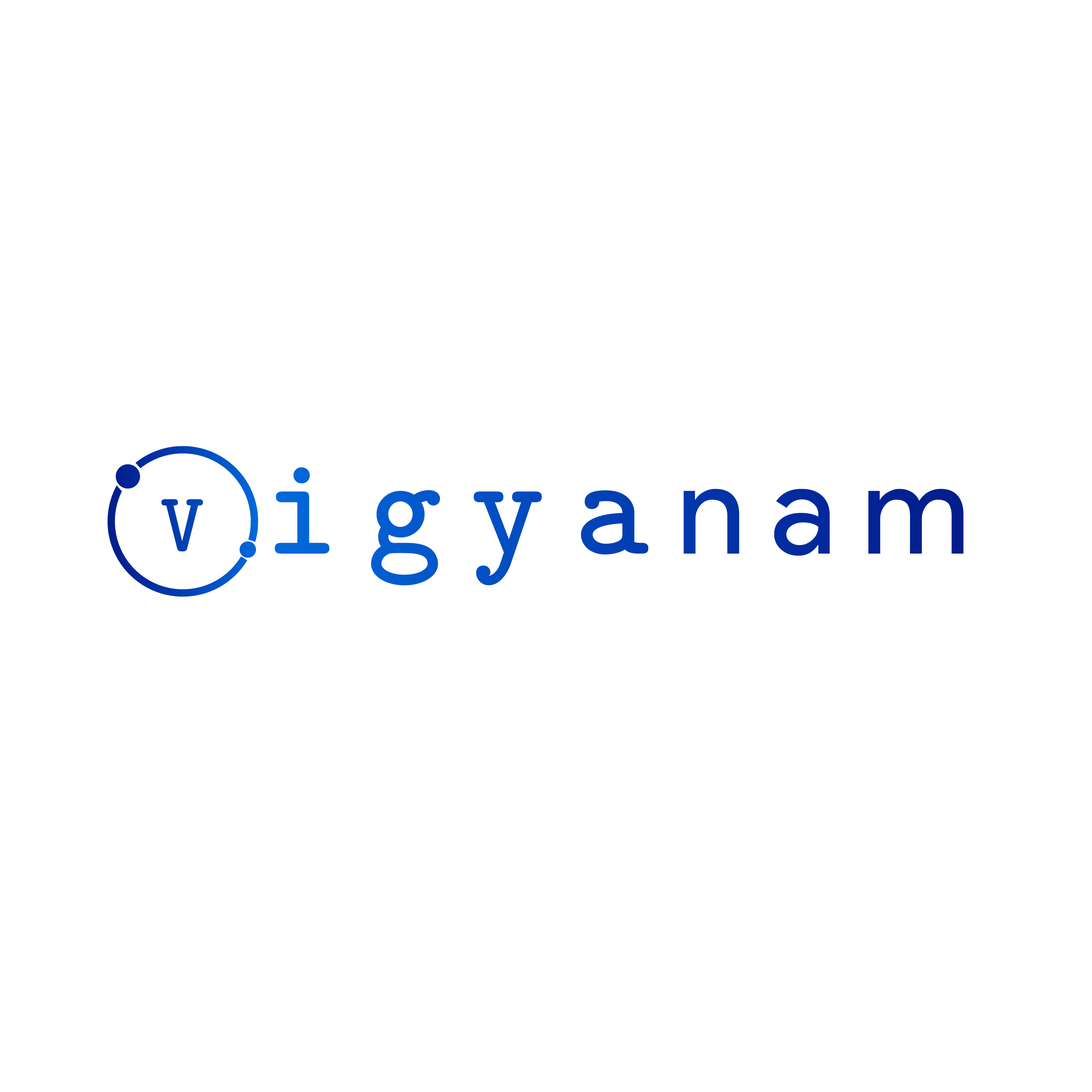
<style>
.page{position:relative;width:1092px;height:1092px;background:#ffffff}
.page>*{position:absolute;margin:0}
.t1{font:142.3px "LMMonoLt10-Bold";letter-spacing:0.2em}
.t2{font:127.8px "ProductSans-Regular";letter-spacing:0.2em}
</style>
<div class="page">
<p class="t1" style="left:275px;top:467px;width:689px;height:118px">igya<span class="t2">nam</span></p>
</div>
